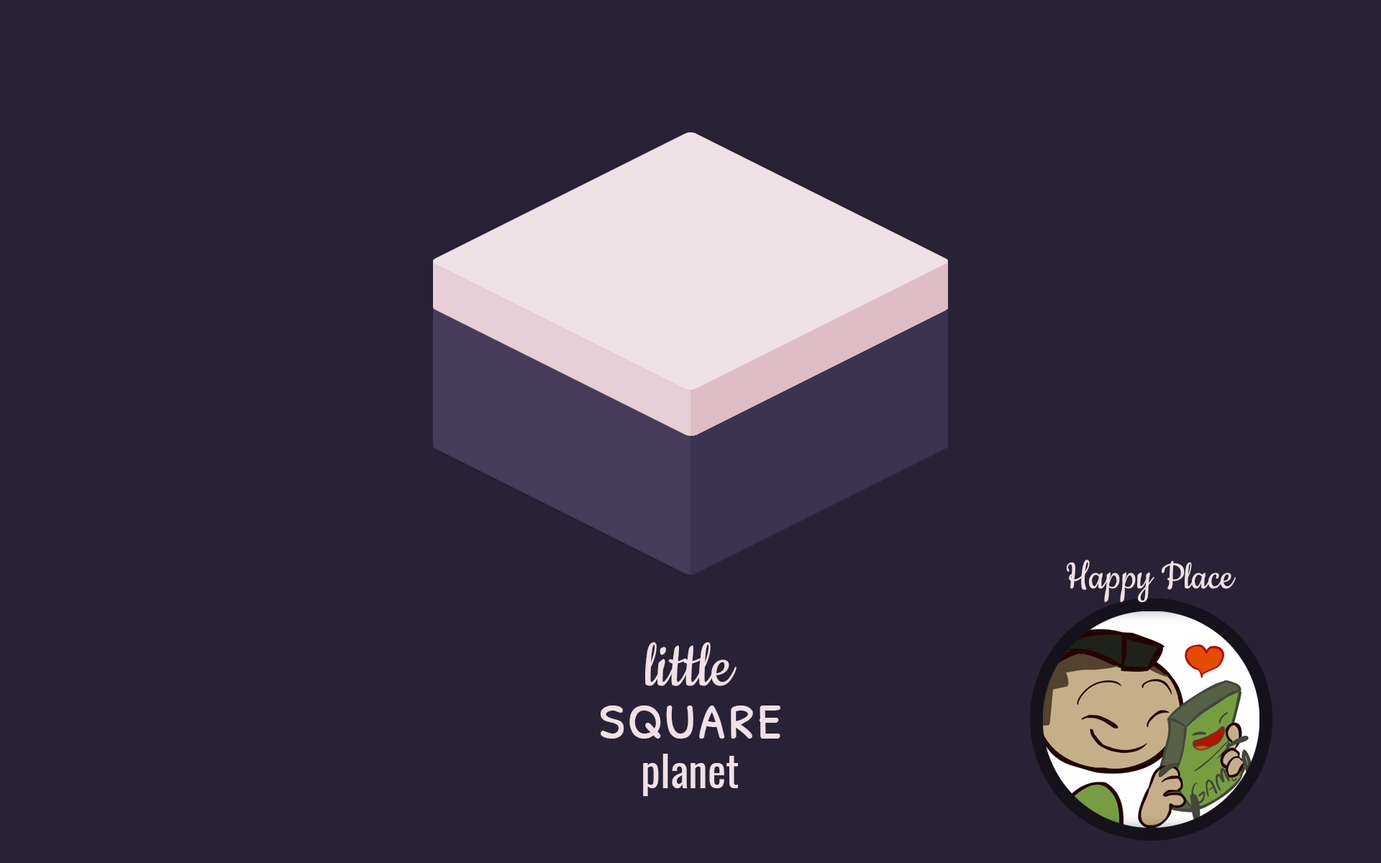
<style>
.page{position:relative;width:1381px;height:863px;background:#282236}
.page>*{position:absolute;margin:0}
.t1{font:43.2px "Cookie-Regular";color:#f0e1e6}
.t2{font:71.9px "Cookie-Regular";color:#ebebeb}
.t3{font:71.9px "PatrickHandSC-Regular";color:#ebebeb}
.t4{font:43.2px "Oswald-Regular";color:#ebebeb}
</style>
<div class="page">
<p class="t1" style="left:1067px;top:560px;width:169px;height:43px">Happy Place</p>
<p class="t2" style="left:645px;top:642px;width:92px;height:44px">little</p>
<p class="t3" style="left:601px;top:706px;width:180px;height:33px">square</p>
<p class="t4" style="left:643px;top:754px;width:95px;height:42px">planet</p>
</div>
